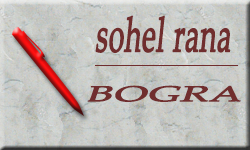
<style>
.page{position:relative;width:250px;height:150px}
.page>*{position:absolute;margin:0}
.t1{font:48.5px "PalatinoLinotype-Roman";color:#702e2e;font-weight:bold;font-style:italic;scale:0.58 1}
.t2{font:21.6px "PalatinoLinotype-Roman";color:#702e2e;font-weight:bold;font-style:italic;scale:1.93 1}
</style>
<div class="page">
<p class="t1" style="left:95px;top:15px;width:136px;height:38px">sohel rana</p>
<p class="t2" style="left:87px;top:85px;width:154px;height:17px">BOGRA</p>
</div>
